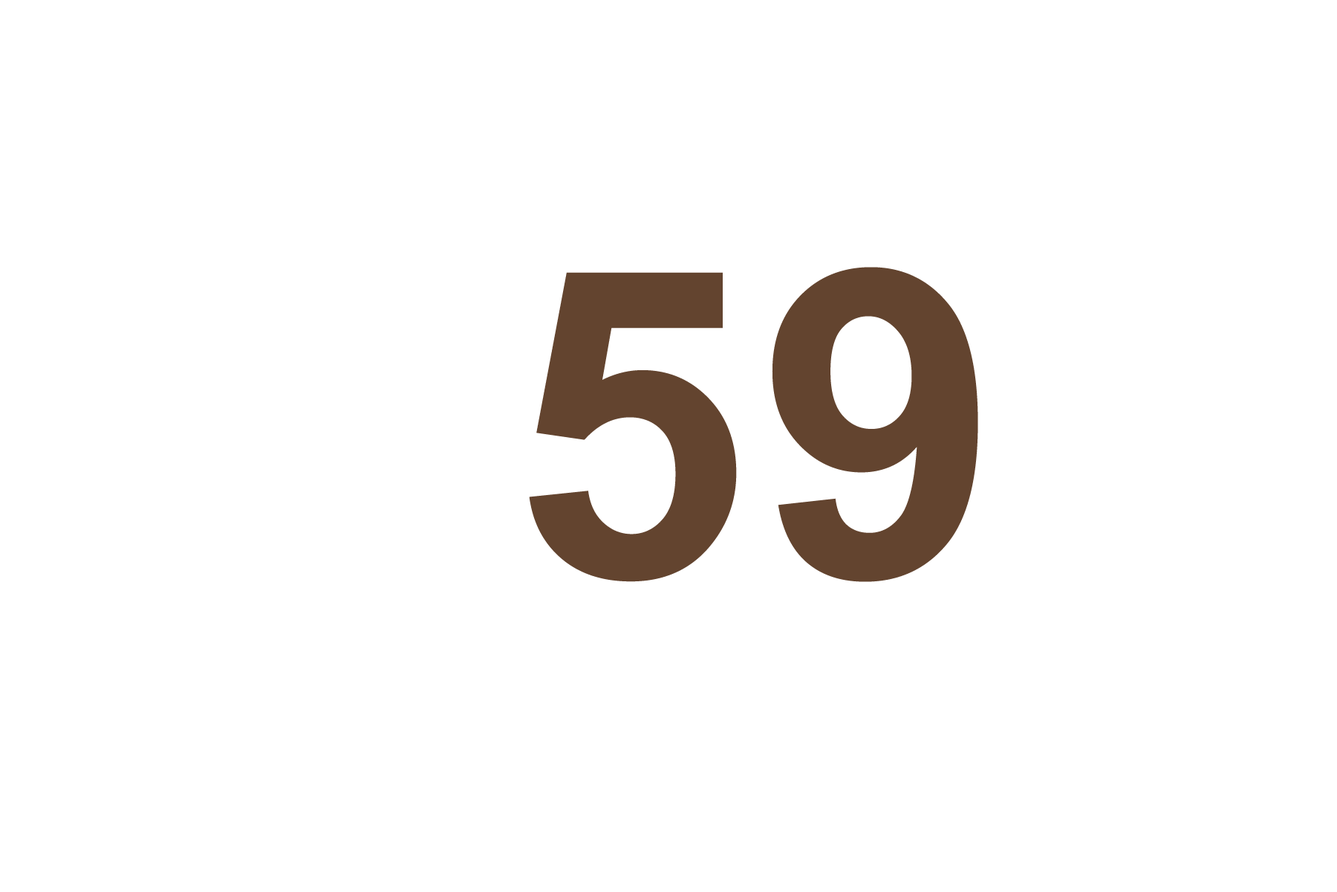
<style>
.page{position:relative;width:1337px;height:892px;background:#ffffff}
.page>*{position:absolute;margin:0}
.t1{font:429.6px "Arial-BoldMT";color:#63442f}
</style>
<div class="page">
<p class="t1" style="left:529px;top:267px;width:450px;height:315px">59</p>
</div>
